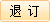
<style>
.page{position:relative;width:50px;height:22px}
.page>*{position:absolute;margin:0}
.t1{font:12px "SimSun";color:#010002}
</style>
<div class="page">
<p class="t1" style="left:10px;top:5px;width:29px;height:12px">退 订</p>
</div>
